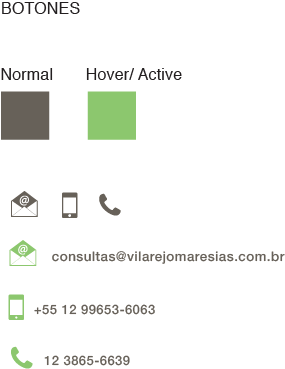
<style>
.page{position:relative;width:285px;height:369px;background:#ffffff}
.page>*{position:absolute;margin:0}
.t1{font:16px "Helvetica";letter-spacing:0.011em;color:#231f20}
.t2{font:13.4px "Helvetica65-Medium";letter-spacing:0.035em;color:#676159}
.t3{font:13px "Helvetica65-Medium";letter-spacing:0.035em;color:#676159}
</style>
<div class="page">
<p class="t1" style="left:2px;top:2px;width:78px;height:12px">BOTONES</p>
<p class="t1" style="left:1px;top:68px;width:52px;height:12px">Normal</p>
<p class="t1" style="left:86px;top:68px;width:96px;height:12px">Hover/ Active</p>
<p class="t2" style="left:52px;top:251px;width:233px;height:13px">consultas@vilarejomaresias.com.br</p>
<p class="t3" style="left:34px;top:304px;width:121px;height:11px">+55 12 99653-6063</p>
<p class="t3" style="left:44px;top:355px;width:86px;height:11px">12 3865-6639</p>
</div>
